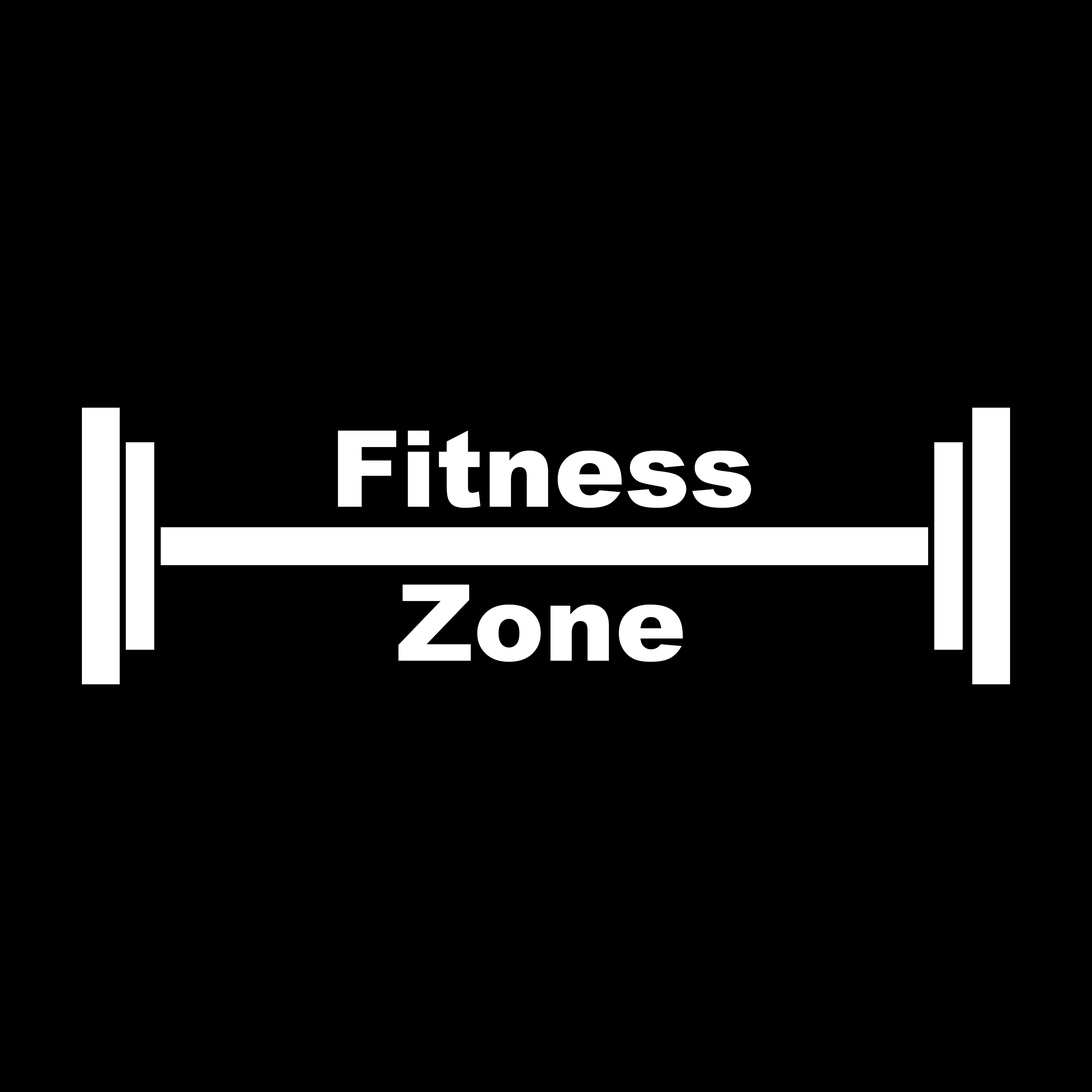
<style>
.page{position:relative;width:1092px;height:1092px;background:#000000}
.page>*{position:absolute;margin:0}
.t1{font:303.3px "Arial-Black";color:#ffffff}
.t2{font:106.2px "Arial-Black";color:#ffffff}
.t3{font:227.5px "Arial-Black";color:#ffffff}
.t4{font:758.3px "Arial-Black";color:#ffffff}
</style>
<div class="page">
<p class="t1" style="left:82px;top:408px;width:38px;height:276px">|</p>
<p class="t1" style="left:972px;top:408px;width:38px;height:276px">|</p>
<p class="t2" style="left:338px;top:431px;width:413px;height:77px">Fitness</p>
<p class="t3" style="left:126px;top:442px;width:28px;height:208px">|</p>
<p class="t3" style="left:934px;top:442px;width:29px;height:208px">|</p>
<p class="t4" style="left:161px;top:527px;width:767px;height:38px">__</p>
<p class="t2" style="left:398px;top:585px;width:285px;height:77px">Zone</p>
</div>
